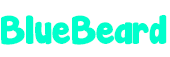
<style>
.page{position:relative;width:170px;height:57px;background:#ffffff}
.page>*{position:absolute;margin:0}
.t1{font:36px "JandaManateeSolid";color:#00ffcc}
</style>
<div class="page">
<p class="t1" style="left:1px;top:14px;width:166px;height:31px">BlueBeard</p>
</div>
